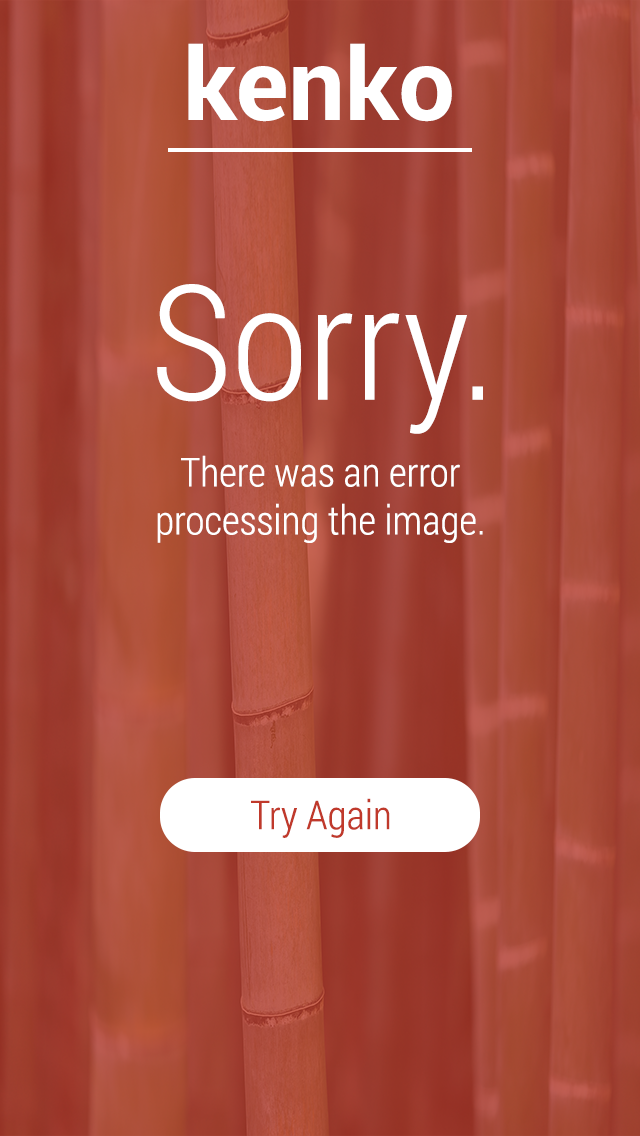
<style>
.page{position:relative;width:640px;height:1136px}
.page>*{position:absolute;margin:0}
.t1{font:100px "Roboto-Bold";color:#ffffff}
.t2{font:160px "RobotoCondensed-Light";color:#ffffff}
.t3{font:40px "RobotoCondensed-Light";color:#ffffff}
.t4{font:40px "RobotoCondensed-Light";color:#c0392b}
</style>
<div class="page">
<p class="t1" style="left:188px;top:43px;width:264px;height:79px">kenko</p>
<p class="t2" style="left:157px;top:284px;width:326px;height:150px">Sorry.</p>
<p class="t3" style="left:157px;top:455px;width:326px;height:88px;text-align:center">There was an error<br>processing the image.</p>
<p class="t4" style="left:251px;top:798px;width:139px;height:40px">Try Again</p>
</div>
